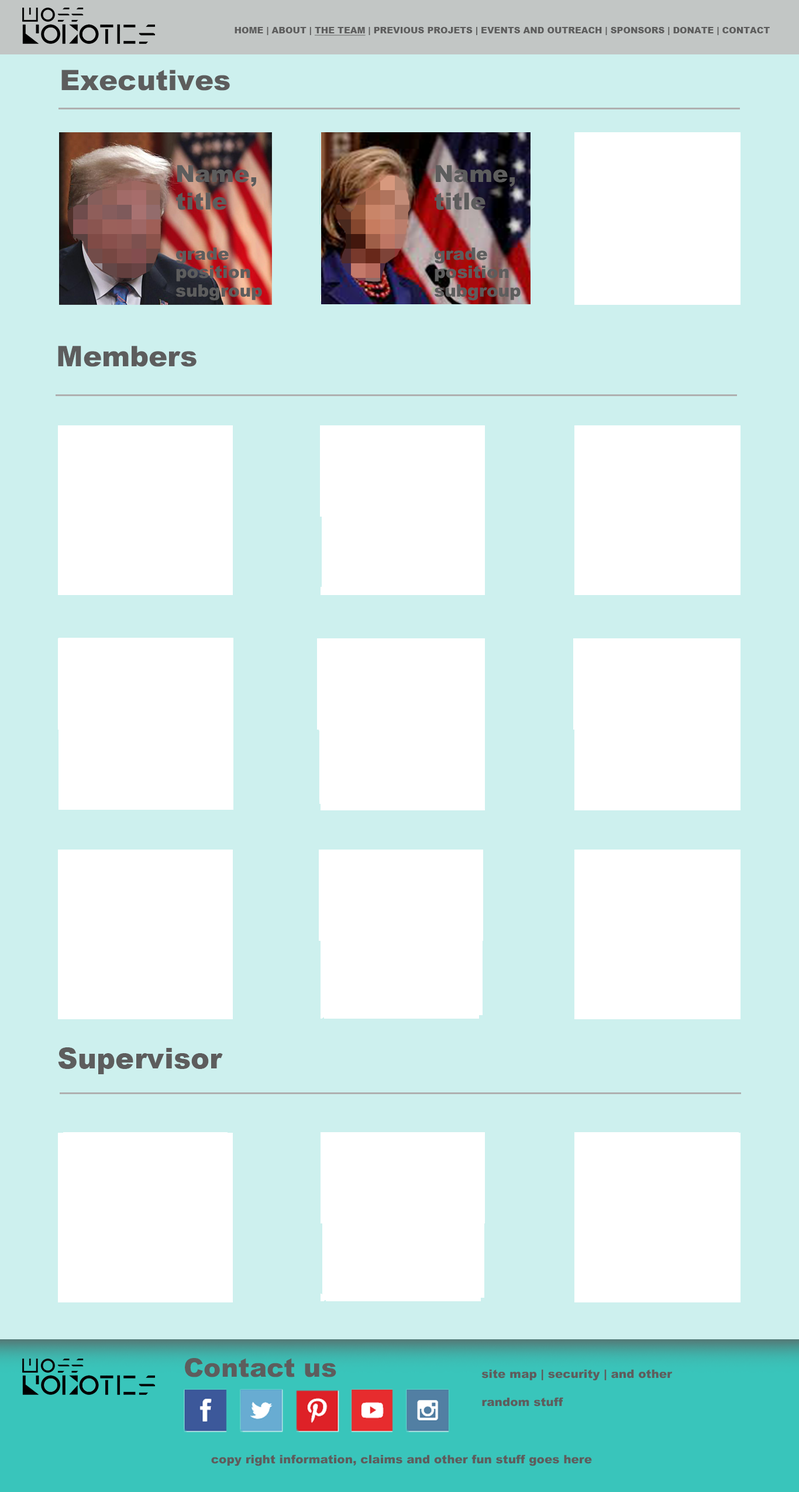
<style>
.page{position:relative;width:799px;height:1492px;background:#cdf0ee}
.page>*{position:absolute;margin:0}
.t1{font:8.8px "Arial-Black";color:#5d5d5d}
.t2{font:8.8px "Arial-Black";color:#5d5d5d;text-decoration:underline}
.t3{font:28.3px "Arial-Black";color:#5d5d5d}
.t4{font:17.2px/18.4px "Arial-Black";color:#5d5d5d}
.t5{font:23.3px/27.6px "Arial-Black";color:#5d5d5d}
.t6{font:28.4px "Arial-Black";color:#5d5d5d}
.t7{font:25.7px "Arial-Black";color:#5d5d5d}
.t8{font:11.7px/28.1px "Arial-Black";color:#5d5d5d}
.t9{font:11.7px "Arial-Black";color:#5d5d5d}
</style>
<div class="page">
<p class="t1" style="left:235px;top:27px;width:535px;height:9px">HOME | ABOUT | <span class="t2">THE TEAM</span> | PREVIOUS PROJETS | EVENTS AND OUTREACH | SPONSORS | DONATE | CONTACT</p>
<p class="t3" style="left:61px;top:70px;width:169px;height:21px">Executives</p>
<p class="t4" style="left:176px;top:165px;width:86px;height:136px"><span class="t5">Name,<br>title<br><br></span>grade<br>position<br>subgroup</p>
<p class="t3" style="left:58px;top:346px;width:139px;height:21px">Members</p>
<p class="t6" style="left:58px;top:1047px;width:165px;height:27px">Supervisor</p>
<p class="t7" style="left:185px;top:1358px;width:151px;height:19px">Contact us</p>
<p class="t8" style="left:482px;top:1369px;width:191px;height:38px">site map | security | and other random stuff</p>
<p class="t9" style="left:211px;top:1455px;width:381px;height:11px">copy right information, claims and other fun stuff goes here</p>
</div>
